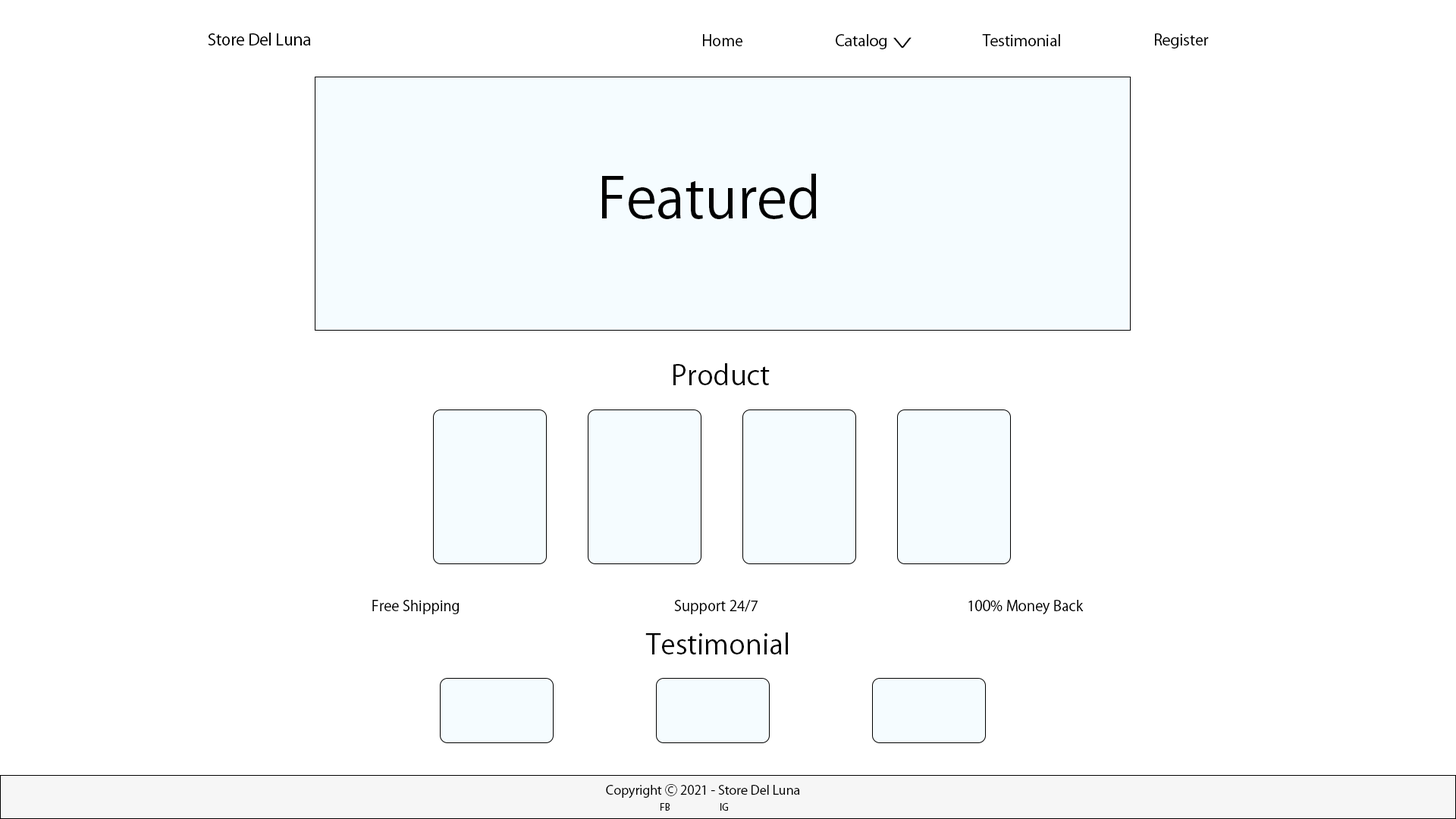
<style>
.page{position:relative;width:1456px;height:819px;background:#ffffff}
.page>*{position:absolute;margin:0}
.t1{font:15.9px "KozGoPr6N-Regular";color:#000000}
.t2{font:15.3px "KozGoPr6N-Regular";color:#000000}
.t3{font:30px "KozGoPr6N-Regular";color:#000000;scale:0.64 1}
.t4{font:55.7px "KozGoPr6N-Regular";color:#000000}
.t5{font:27.8px "KozGoPr6N-Regular";color:#000000}
.t6{font:14.3px "KozGoPr6N-Regular";color:#000000}
.t7{font:12.5px "KozGoPr6N-Regular";color:#000000}
.t8{font:9.1px "KozGoPr6N-Regular";color:#000000}
</style>
<div class="page">
<p class="t1" style="left:208px;top:33px;width:103px;height:12px">Store Del Luna</p>
<p class="t2" style="left:703px;top:34px;width:39px;height:12px">Home</p>
<p class="t2" style="left:836px;top:34px;width:50px;height:15px">Catalog</p>
<p class="t3" style="left:893px;top:37px;width:19px;height:12px;rotate:89deg">&gt;</p>
<p class="t2" style="left:982px;top:34px;width:78px;height:12px">Testimonial</p>
<p class="t2" style="left:1155px;top:33px;width:54px;height:16px">Register</p>
<p class="t4" style="left:602px;top:174px;width:215px;height:45px">Featured</p>
<p class="t5" style="left:673px;top:363px;width:97px;height:22px">Product</p>
<p class="t6" style="left:372px;top:600px;width:87px;height:14px">Free Shipping</p>
<p class="t6" style="left:674px;top:600px;width:84px;height:14px">Support 24/7</p>
<p class="t6" style="left:968px;top:600px;width:116px;height:15px">100% Money Back</p>
<p class="t5" style="left:645px;top:632px;width:143px;height:22px">Testimonial</p>
<p class="t7" style="left:606px;top:784px;width:194px;height:15px">Copyright Ⓒ 2021 - Store Del Luna</p>
<p class="t8" style="left:660px;top:803px;width:10px;height:8px">FB</p>
<p class="t8" style="left:720px;top:803px;width:8px;height:8px">IG</p>
</div>
